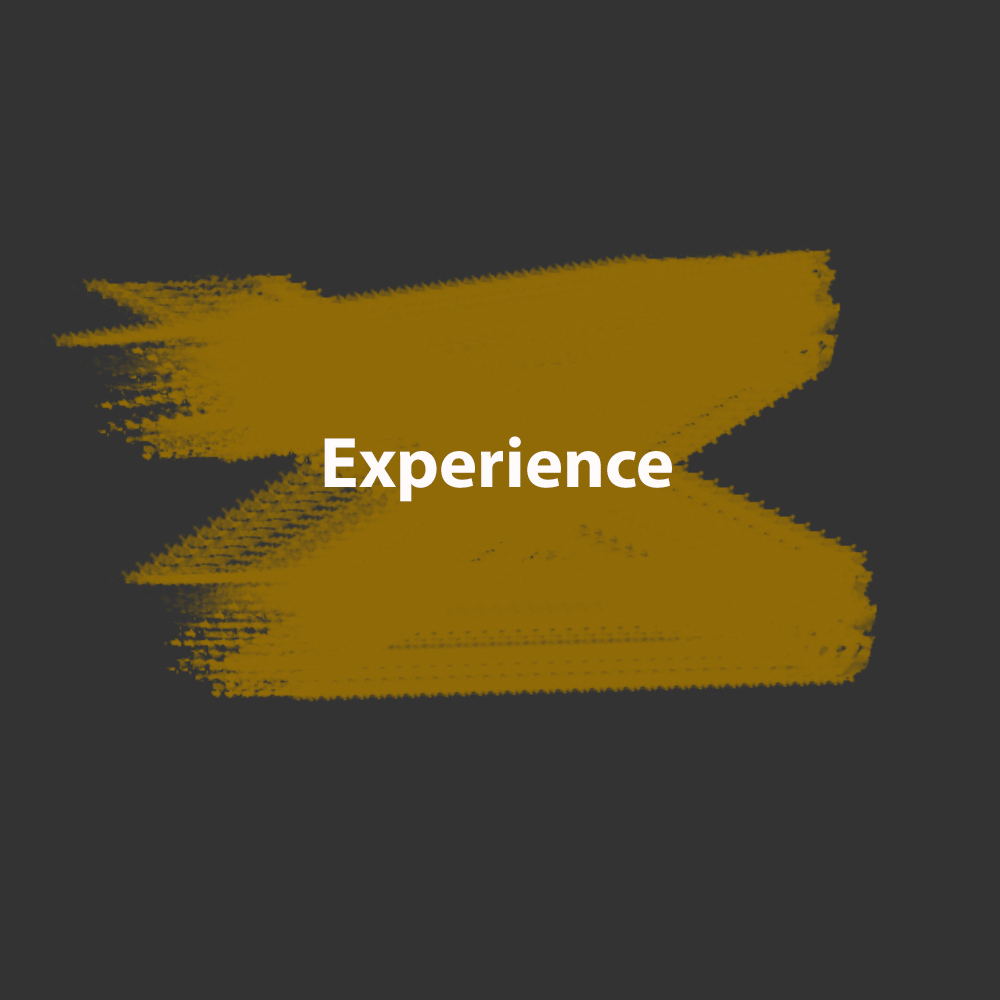
<style>
.page{position:relative;width:1000px;height:1000px;background:#333333}
.page>*{position:absolute;margin:0}
.t1{font:72px "MyriadPro-Bold";color:#fffbfb}
</style>
<div class="page">
<p class="t1" style="left:324px;top:436px;width:348px;height:66px">Experience</p>
</div>
